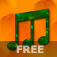
<style>
.page{position:relative;width:57px;height:57px}
.page>*{position:absolute;margin:0}
.t1{font:10px "Verdana-Bold";color:#dcc1a5}
</style>
<div class="page">
<p class="t1" style="left:16px;top:45px;width:28px;height:8px">FREE</p>
</div>
